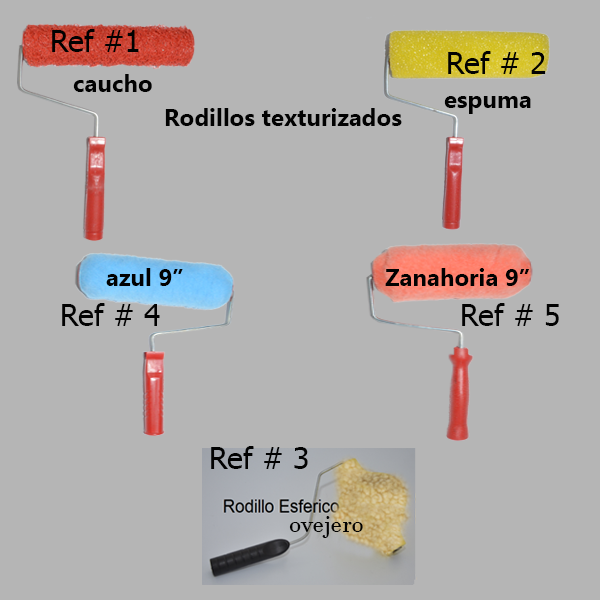
<style>
.page{position:relative;width:600px;height:600px;background:#b5b5b5}
.page>*{position:absolute;margin:0}
.t1{font:30px "Tahoma";color:#020202}
.t2{font:24px "Gadugi-Bold";color:#020202}
.t3{font:24px "JavaneseText";color:#020202}
</style>
<div class="page">
<p class="t1" style="left:52px;top:29px;width:87px;height:23px">Ref #1</p>
<p class="t1" style="left:448px;top:51px;width:98px;height:23px">Ref # 2</p>
<p class="t2" style="left:73px;top:74px;width:79px;height:18px">caucho</p>
<p class="t2" style="left:444px;top:96px;width:87px;height:18px">espuma</p>
<p class="t2" style="left:165px;top:108px;width:237px;height:18px">Rodillos texturizados</p>
<p class="t2" style="left:106px;top:268px;width:77px;height:18px">azul 9”</p>
<p class="t2" style="left:385px;top:268px;width:145px;height:18px">Zanahoria 9”</p>
<p class="t1" style="left:62px;top:303px;width:98px;height:23px">Ref # 4</p>
<p class="t1" style="left:462px;top:303px;width:97px;height:23px">Ref # 5</p>
<p class="t1" style="left:211px;top:446px;width:97px;height:23px">Ref # 3</p>
<p class="t3" style="left:289px;top:516px;width:74px;height:22px">ovejero</p>
</div>
